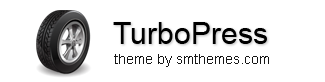
<style>
.page{position:relative;width:325px;height:82px;background:#ffffff}
.page>*{position:absolute;margin:0}
.t1{font:30px "ArialMT";color:#000000}
.t2{font:14px "ArialMT";color:#161616}
</style>
<div class="page">
<p class="t1" style="left:113px;top:22px;width:154px;height:22px">TurboPress</p>
<p class="t2" style="left:114px;top:54px;width:155px;height:13px">theme by smthemes.com</p>
</div>
